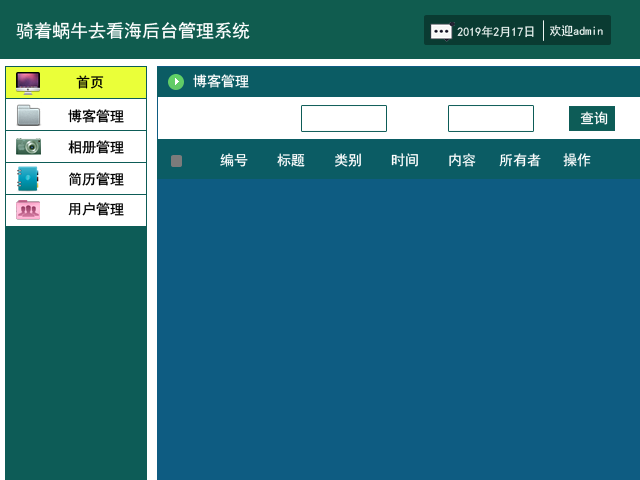
<style>
.page{position:relative;width:640px;height:480px;background:#0e5c82}
.page>*{position:absolute;margin:0}
.t1{font:18px "SimHei";color:#ffffff}
.t2{font:12px "SimHei";color:#ecf4f2}
.t3{font:14px "SimHei";color:#000000}
.t4{font:14px "SimHei";color:#ffffff}
</style>
<div class="page">
<p class="t1" style="left:16px;top:22px;width:234px;height:18px">骑着蜗牛去看海后台管理系统</p>
<p class="t2" style="left:457px;top:26px;width:77px;height:12px">2019年2月17日</p>
<p class="t2" style="left:550px;top:25px;width:53px;height:12px">欢迎admin</p>
<p class="t3" style="left:76px;top:75px;width:28px;height:14px">首页</p>
<p class="t4" style="left:193px;top:74px;width:56px;height:14px">博客管理</p>
<p class="t3" style="left:68px;top:109px;width:56px;height:14px">博客管理</p>
<p class="t4" style="left:580px;top:111px;width:28px;height:14px">查询</p>
<p class="t3" style="left:68px;top:140px;width:56px;height:14px">相册管理</p>
<p class="t4" style="left:220px;top:153px;width:28px;height:14px">编号</p>
<p class="t4" style="left:277px;top:153px;width:28px;height:14px">标题</p>
<p class="t4" style="left:335px;top:153px;width:26px;height:14px">类别</p>
<p class="t4" style="left:391px;top:153px;width:27px;height:14px">时间</p>
<p class="t4" style="left:449px;top:153px;width:27px;height:14px">内容</p>
<p class="t4" style="left:499px;top:153px;width:42px;height:14px">所有者</p>
<p class="t4" style="left:563px;top:153px;width:28px;height:14px">操作</p>
<p class="t3" style="left:69px;top:172px;width:55px;height:14px">简历管理</p>
<p class="t3" style="left:68px;top:202px;width:56px;height:14px">用户管理</p>
</div>
